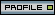
<style>
.page{position:relative;width:55px;height:15px;background:#cdcdcd}
.page>*{position:absolute;margin:0}
.t1{font:8px "BitDustTwo";color:#000000}
</style>
<div class="page">
<p class="t1" style="left:5px;top:5px;width:37px;height:5px">PROFILE</p>
</div>
